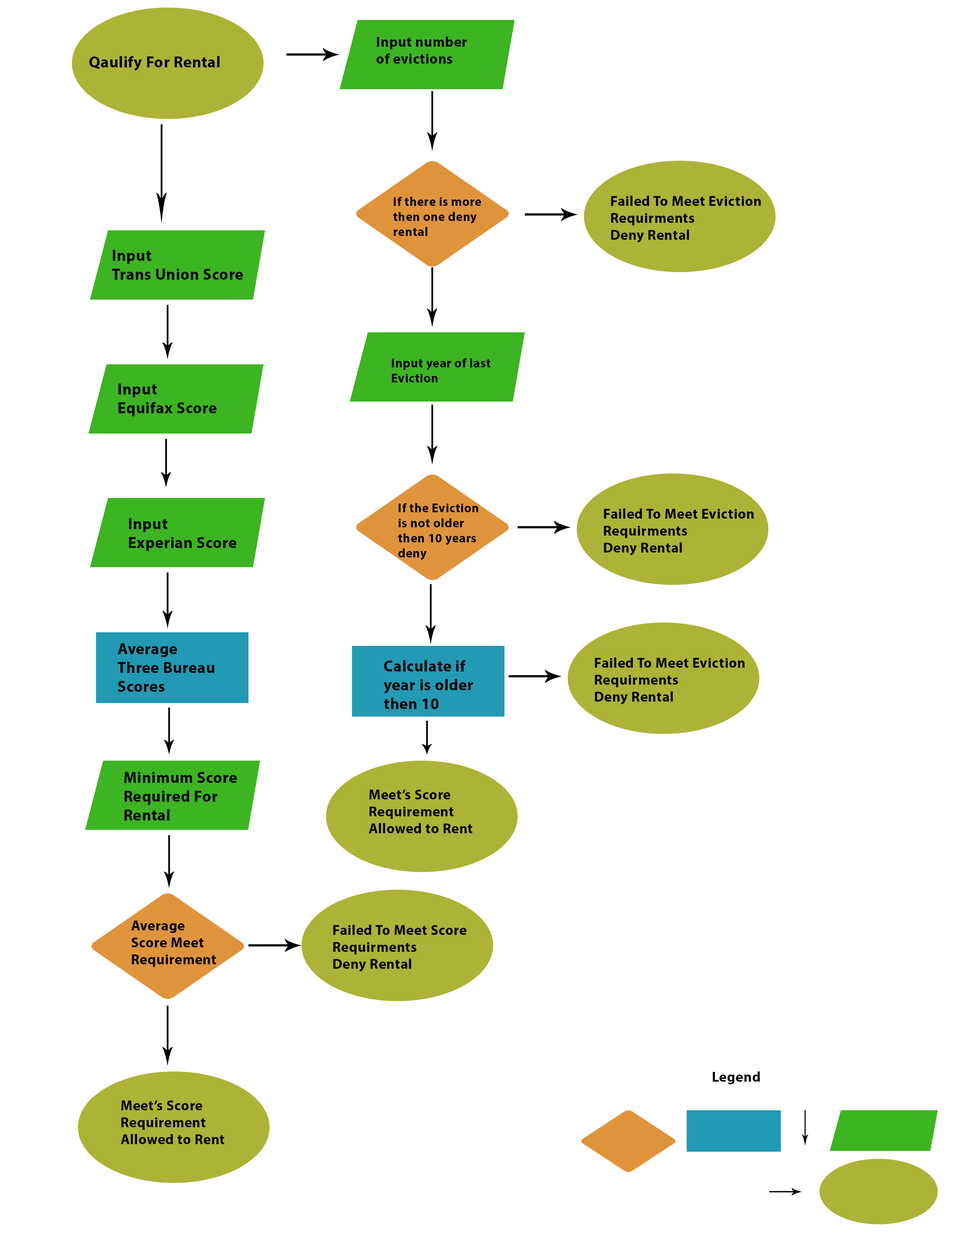
<style>
.page{position:relative;width:960px;height:1242px;background:#ffffff}
.page>*{position:absolute;margin:0}
.t1{font:14.1px "MyriadPro-Bold";letter-spacing:0.025em;color:#000000}
.t2{font:15.7px "MyriadPro-Bold";letter-spacing:0.025em;color:#000000}
.t3{font:12.5px "MyriadPro-Bold";letter-spacing:0.025em;color:#000000}
</style>
<div class="page">
<p class="t1" style="left:376px;top:37px;width:91px;height:27px">Input number <br>of evictions</p>
<p class="t2" style="left:89px;top:56px;width:130px;height:15px">Qaulify For Rental</p>
<p class="t3" style="left:393px;top:197px;width:88px;height:39px">If there is more <br>then one deny<br>rental</p>
<p class="t1" style="left:611px;top:196px;width:150px;height:47px">Failed To Meet Eviction<br>Requirments <br>Deny Rental</p>
<p class="t2" style="left:112px;top:250px;width:131px;height:30px">Input<br>Trans Union Score</p>
<p class="t3" style="left:392px;top:358px;width:98px;height:24px">Input year of last <br>Eviction</p>
<p class="t2" style="left:118px;top:384px;width:98px;height:32px">Input<br>Equifax Score</p>
<p class="t3" style="left:398px;top:503px;width:80px;height:57px">If the Eviction<br>is not older <br>then 10 years<br>deny</p>
<p class="t1" style="left:604px;top:509px;width:150px;height:47px">Failed To Meet Eviction<br>Requirments <br>Deny Rental</p>
<p class="t2" style="left:129px;top:518px;width:107px;height:33px">Input <br>Experian Score</p>
<p class="t2" style="left:117px;top:643px;width:98px;height:49px">Average<br>Three Bureau<br>Scores</p>
<p class="t2" style="left:384px;top:660px;width:89px;height:49px">Calculate if<br>year is older<br>then 10</p>
<p class="t1" style="left:595px;top:658px;width:150px;height:47px">Failed To Meet Eviction<br>Requirments <br>Deny Rental</p>
<p class="t2" style="left:124px;top:772px;width:113px;height:49px">Minimum Score<br>Required For<br>Rental</p>
<p class="t1" style="left:369px;top:790px;width:103px;height:43px">Meet’s Score<br>Requirement<br>Allowed to Rent</p>
<p class="t1" style="left:131px;top:921px;width:85px;height:46px">Average<br>Score Meet<br>Requirement</p>
<p class="t1" style="left:333px;top:925px;width:133px;height:47px">Failed To Meet Score<br>Requirments <br>Deny Rental</p>
<p class="t1" style="left:713px;top:1072px;width:47px;height:13px">Legend</p>
<p class="t1" style="left:121px;top:1101px;width:103px;height:43px">Meet’s Score<br>Requirement<br>Allowed to Rent</p>
</div>
